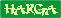
<style>
.page{position:relative;width:61px;height:18px;background:#029834}
.page>*{position:absolute;margin:0}
.t1{font:16.2px "SevenSwordsmenBB";color:#eeefa3}
</style>
<div class="page">
<p class="t1" style="left:4px;top:4px;width:54px;height:12px">harga</p>
</div>
